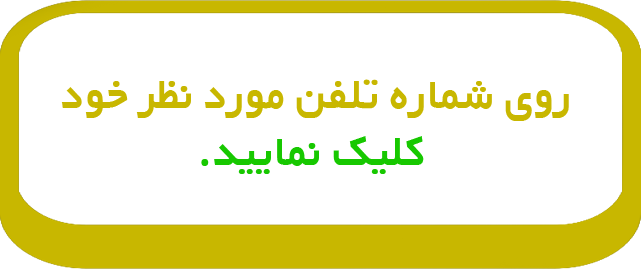
<style>
.page{position:relative;width:641px;height:269px;background:#ffffff}
.page>*{position:absolute;margin:0}
.t1{font:48px "BYekan+-Bold";color:#c8b700}
.t2{font:48px "BYekan+-Bold";color:#17c800}
</style>
<div class="page">
<p class="t1" style="left:61px;top:79px;width:508px;height:95px;text-align:center">روی شماره تلفن مورد نظر خود<br> کلیک نمایید.</p>
<p class="t1" style="left:61px;top:79px;width:508px;height:95px;text-align:center">روی شماره تلفن مورد نظر خود<br> کلیک نمایید.</p>
<p class="t2" style="left:61px;top:79px;width:508px;height:95px;text-align:center">روی شماره تلفن مورد نظر خود<br> <span class="t1">کلیک نمایید.</span></p>
<p class="t1" style="left:61px;top:79px;width:508px;height:95px;text-align:center">روی شماره تلفن مورد نظر خود<br><span class="t2"> کلیک نمایید.</span></p>
</div>
